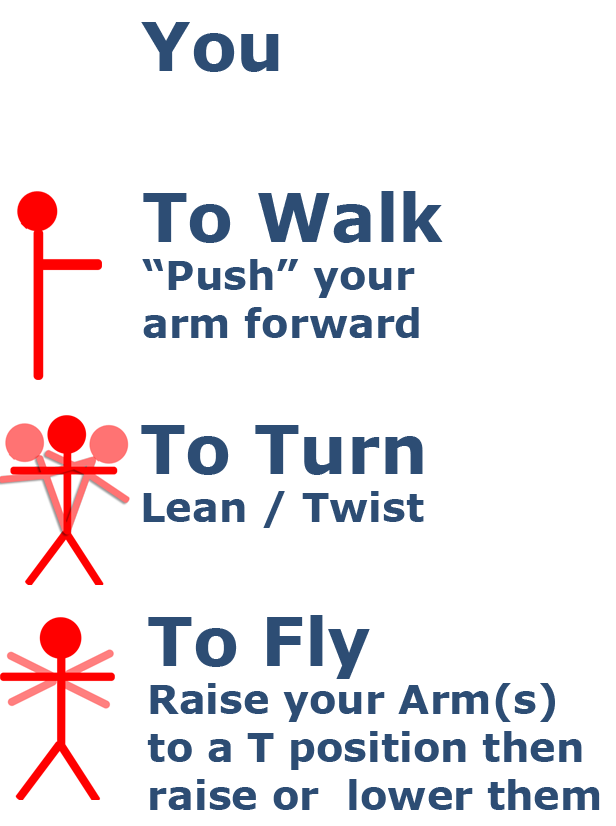
<style>
.page{position:relative;width:616px;height:826px;background:#ffffff}
.page>*{position:absolute;margin:0}
.t1{font:66.7px "Verdana-Bold";color:#2d4d74}
.t2{font:40px "Verdana-Bold";color:#2d4d74}
</style>
<div class="page">
<p class="t1" style="left:141px;top:22px;width:138px;height:50px">You</p>
<p class="t2" style="left:142px;top:191px;width:301px;height:147px"><span class="t1">To Walk<br></span>“Push” your<br>arm forward</p>
<p class="t2" style="left:141px;top:425px;width:283px;height:103px"><span class="t1">To Turn<br></span>Lean / Twist</p>
<p class="t2" style="left:147px;top:615px;width:453px;height:195px"><span class="t1">To Fly<br></span>Raise your Arm(s)<br>to a T position then<br>raise or  lower them</p>
</div>
